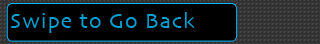
<style>
.page{position:relative;width:320px;height:44px;background:#000000}
.page>*{position:absolute;margin:0}
.t1{font:22.1px "Skia-Regular";letter-spacing:0.04em;color:#009fd1}
</style>
<div class="page">
<p class="t1" style="left:11px;top:12px;width:184px;height:21px">Swipe to Go Back</p>
</div>
